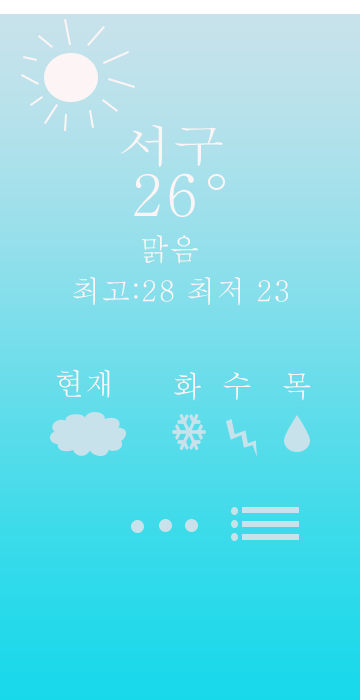
<style>
.page{position:relative;width:360px;height:700px}
.page>*{position:absolute;margin:0}
.t1{font:44px "Haansoft-Batang";color:#fdf5f5;scale:1.21 1}
.t2{font:60px "Haansoft-Batang";color:#fdf5f5}
.t3{font:30px "Haansoft-Batang";color:#fdf5f5}
</style>
<div class="page">
<p class="t1" style="left:121px;top:125px;width:102px;height:42px">서구</p>
<p class="t2" style="left:134px;top:173px;width:61px;height:44px">26</p>
<p class="t3" style="left:141px;top:235px;width:57px;height:29px">맑음</p>
<p class="t3" style="left:73px;top:277px;width:215px;height:29px">최고:28 최저 23</p>
<p class="t3" style="left:56px;top:369px;width:54px;height:29px">현재</p>
<p class="t3" style="left:174px;top:372px;width:137px;height:29px">화  수   목</p>
</div>
